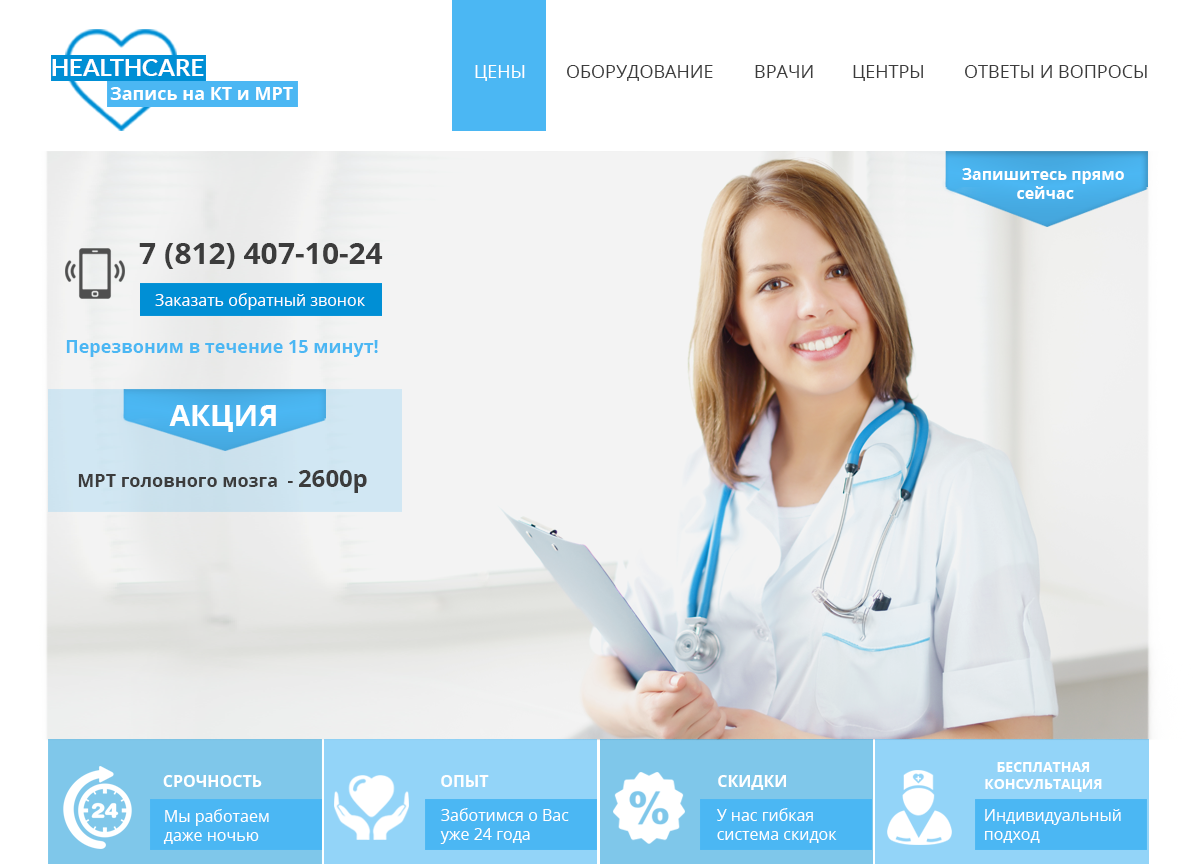
<style>
.page{position:relative;width:1200px;height:864px;background:#ffffff}
.page>*{position:absolute;margin:0}
.t1{font:23.9px "Lato-Bold";color:#ffffff}
.t2{font:18px "OpenSans";color:#ffffff}
.t3{font:18px "OpenSans";color:#3c3c3c}
.t4{font:18px "OpenSans-Bold";color:#ffffff}
.t5{font:16px "OpenSans-Bold";color:#ffffff}
.t6{font:30px "OpenSans-Bold";color:#3c3c3c}
.t7{font:16px "OpenSans";color:#ffffff}
.t8{font:18px "OpenSans-Bold";color:#4bb7f3}
.t9{font:30px "OpenSans-Bold";color:#ffffff}
.t10{font:18px "OpenSans-Bold";color:#3c3c3c}
.t11{font:24px "OpenSans-Bold";color:#3c3c3c}
.t12{font:14px "OpenSans-Bold";color:#ffffff}
</style>
<div class="page">
<p class="t1" style="left:52px;top:59px;width:152px;height:17px">HEALTHCARE</p>
<p class="t2" style="left:475px;top:65px;width:50px;height:16px">ЦЕНЫ</p>
<p class="t3" style="left:567px;top:65px;width:146px;height:16px">ОБОРУДОВАНИЕ</p>
<p class="t3" style="left:755px;top:65px;width:58px;height:13px">ВРАЧИ</p>
<p class="t3" style="left:853px;top:65px;width:70px;height:16px">ЦЕНТРЫ</p>
<p class="t3" style="left:965px;top:65px;width:182px;height:13px">ОТВЕТЫ И ВОПРОСЫ</p>
<p class="t4" style="left:110px;top:87px;width:183px;height:13px">Запись на КТ и МРТ</p>
<p class="t5" style="left:962px;top:168px;width:162px;height:31px;text-align:center">Запишитесь прямо <br>сейчас</p>
<p class="t6" style="left:139px;top:243px;width:244px;height:26px">7 (812) 407-10-24</p>
<p class="t7" style="left:155px;top:293px;width:210px;height:17px">Заказать обратный звонок</p>
<p class="t8" style="left:66px;top:340px;width:312px;height:17px">Перезвоним в течение 15 минут!</p>
<p class="t9" style="left:169px;top:405px;width:107px;height:27px">АКЦИЯ</p>
<p class="t10" style="left:78px;top:470px;width:289px;height:23px">МРТ головного мозга  - <span class="t11">2600р</span></p>
<p class="t12" style="left:985px;top:762px;width:117px;height:30px;text-align:center">БЕСПЛАТНАЯ<br>КОНСУЛЬТАЦИЯ</p>
<p class="t5" style="left:163px;top:775px;width:99px;height:12px">СРОЧНОСТЬ</p>
<p class="t5" style="left:441px;top:775px;width:48px;height:12px">ОПЫТ</p>
<p class="t5" style="left:718px;top:775px;width:68px;height:15px">СКИДКИ</p>
<p class="t7" style="left:163px;top:809px;width:106px;height:35px">Мы работаем<br>даже ночью</p>
<p class="t7" style="left:440px;top:808px;width:129px;height:36px">Заботимся о Вас<br>уже 24 года</p>
<p class="t7" style="left:717px;top:808px;width:120px;height:35px">У нас гибкая <br>система скидок</p>
<p class="t7" style="left:985px;top:809px;width:136px;height:34px">Индивидуальный<br>подход</p>
</div>
